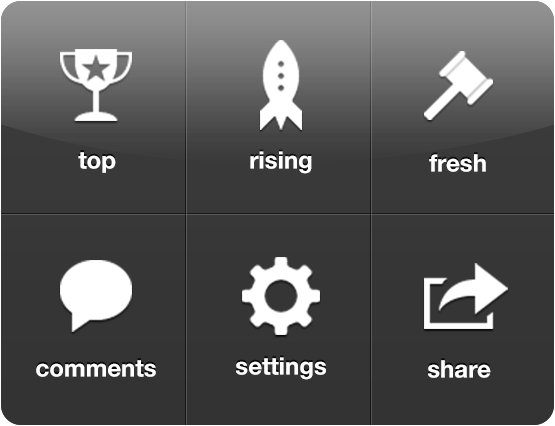
<style>
.page{position:relative;width:555px;height:426px}
.page>*{position:absolute;margin:0}
.t1{font:24px "HelveticaNeue-Bold";color:#ffffff}
</style>
<div class="page">
<p class="t1" style="left:78px;top:152px;width:38px;height:21px">top</p>
<p class="t1" style="left:250px;top:151px;width:62px;height:23px">rising</p>
<p class="t1" style="left:429px;top:154px;width:57px;height:18px">fresh</p>
<p class="t1" style="left:36px;top:360px;width:120px;height:17px">comments</p>
<p class="t1" style="left:236px;top:357px;width:90px;height:23px">settings</p>
<p class="t1" style="left:428px;top:360px;width:63px;height:18px">share</p>
</div>
